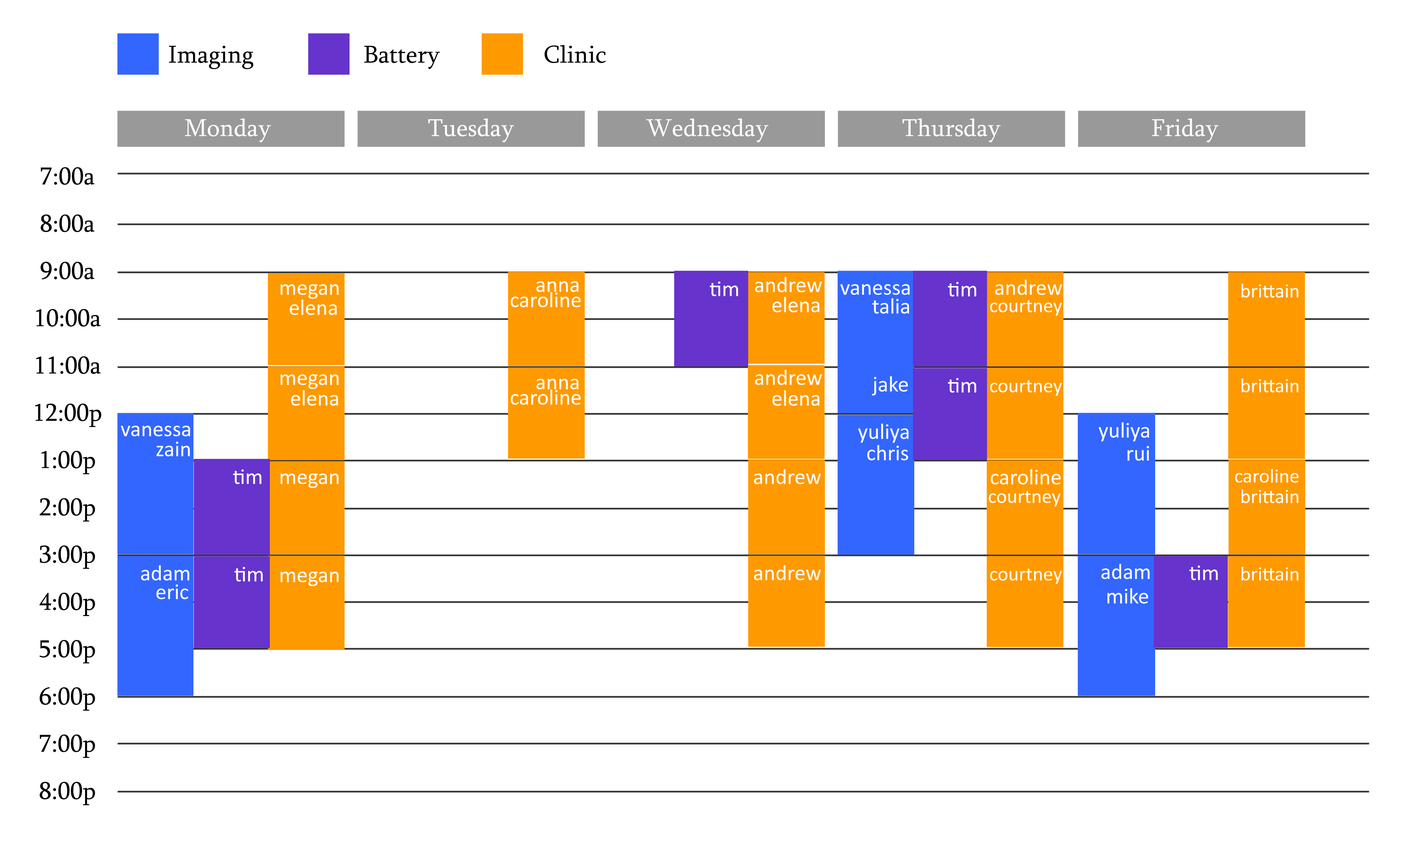
<style>
.page{position:relative;width:1401px;height:851px;background:#ffffff}
.page>*{position:absolute;margin:0}
.t1{font:25px "Sylfaen";color:#000000}
.t2{font:25px "Sylfaen";color:#ffffff}
.t3{font:25px/47.3px "Sylfaen";color:#000000}
.t4{font:22.2px "Calibri";color:#ffffff}
.t5{font:20.2px "Calibri";color:#ffffff}
</style>
<div class="page">
<p class="t1" style="left:169px;top:46px;width:85px;height:23px">Imaging</p>
<p class="t1" style="left:364px;top:46px;width:76px;height:23px">Battery</p>
<p class="t1" style="left:545px;top:45px;width:61px;height:18px">Clinic</p>
<p class="t2" style="left:185px;top:118px;width:86px;height:24px">Monday</p>
<p class="t2" style="left:428px;top:118px;width:86px;height:24px">Tuesday</p>
<p class="t2" style="left:646px;top:118px;width:123px;height:24px">Wednesday</p>
<p class="t2" style="left:903px;top:118px;width:98px;height:24px">Thursday</p>
<p class="t2" style="left:1152px;top:118px;width:67px;height:24px">Friday</p>
<p class="t3" style="left:35px;top:167px;width:66px;height:638px;text-align:center">7:00a<br>8:00a<br>9:00a<br>10:00a<br>11:00a<br>12:00p<br>1:00p<br>2:00p<br>3:00p<br>4:00p<br>5:00p<br>6:00p<br>7:00p<br>8:00p</p>
<p class="t4" style="left:537px;top:281px;width:42px;height:11px">anna</p>
<p class="t4" style="left:710px;top:281px;width:28px;height:15px">tim</p>
<p class="t4" style="left:755px;top:277px;width:67px;height:15px">andrew</p>
<p class="t4" style="left:948px;top:282px;width:29px;height:15px">tim</p>
<p class="t4" style="left:995px;top:280px;width:67px;height:15px">andrew</p>
<p class="t4" style="left:281px;top:284px;width:58px;height:15px">megan</p>
<p class="t4" style="left:511px;top:292px;width:70px;height:15px">caroline</p>
<p class="t4" style="left:841px;top:284px;width:69px;height:11px">vanessa</p>
<p class="t5" style="left:1242px;top:284px;width:57px;height:14px">brittain</p>
<p class="t4" style="left:290px;top:299px;width:47px;height:16px">elena</p>
<p class="t4" style="left:772px;top:297px;width:48px;height:15px">elena</p>
<p class="t4" style="left:873px;top:298px;width:36px;height:16px">talia</p>
<p class="t5" style="left:990px;top:300px;width:72px;height:16px">courtney</p>
<p class="t4" style="left:281px;top:374px;width:58px;height:15px">megan</p>
<p class="t4" style="left:755px;top:369px;width:67px;height:16px">andrew</p>
<p class="t4" style="left:872px;top:376px;width:36px;height:19px">jake</p>
<p class="t4" style="left:948px;top:378px;width:29px;height:15px">tim</p>
<p class="t4" style="left:511px;top:389px;width:70px;height:16px">caroline</p>
<p class="t4" style="left:537px;top:378px;width:42px;height:11px">anna</p>
<p class="t5" style="left:990px;top:380px;width:72px;height:16px">courtney</p>
<p class="t5" style="left:1242px;top:378px;width:57px;height:14px">brittain</p>
<p class="t4" style="left:291px;top:390px;width:47px;height:16px">elena</p>
<p class="t4" style="left:772px;top:390px;width:48px;height:16px">elena</p>
<p class="t4" style="left:121px;top:425px;width:69px;height:11px">vanessa</p>
<p class="t4" style="left:858px;top:423px;width:51px;height:20px">yuliya</p>
<p class="t4" style="left:1099px;top:422px;width:51px;height:19px">yuliya</p>
<p class="t4" style="left:156px;top:441px;width:34px;height:15px">zain</p>
<p class="t4" style="left:868px;top:445px;width:41px;height:15px">chris</p>
<p class="t4" style="left:1128px;top:446px;width:22px;height:15px">rui</p>
<p class="t4" style="left:233px;top:469px;width:29px;height:15px">tim</p>
<p class="t4" style="left:281px;top:473px;width:58px;height:15px">megan</p>
<p class="t4" style="left:754px;top:469px;width:67px;height:15px">andrew</p>
<p class="t4" style="left:991px;top:469px;width:70px;height:15px">caroline</p>
<p class="t5" style="left:1236px;top:468px;width:63px;height:15px">caroline</p>
<p class="t5" style="left:989px;top:491px;width:72px;height:16px">courtney</p>
<p class="t5" style="left:1242px;top:489px;width:57px;height:14px">brittain</p>
<p class="t4" style="left:141px;top:565px;width:49px;height:16px">adam</p>
<p class="t4" style="left:234px;top:567px;width:29px;height:15px">tim</p>
<p class="t4" style="left:754px;top:565px;width:67px;height:15px">andrew</p>
<p class="t5" style="left:990px;top:569px;width:72px;height:15px">courtney</p>
<p class="t4" style="left:1102px;top:564px;width:48px;height:15px">adam</p>
<p class="t4" style="left:1190px;top:565px;width:28px;height:15px">tim</p>
<p class="t5" style="left:1242px;top:567px;width:57px;height:14px">brittain</p>
<p class="t4" style="left:281px;top:571px;width:58px;height:15px">megan</p>
<p class="t4" style="left:156px;top:584px;width:32px;height:15px">eric</p>
<p class="t4" style="left:1108px;top:588px;width:41px;height:16px">mike</p>
</div>
